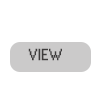
<style>
.page{position:relative;width:100px;height:100px;background:#ffffff}
.page>*{position:absolute;margin:0}
.t1{font:14px "MS Sans Serif";color:#3e3c3c;font-weight:bold;scale:0.91 1}
.t2{font:11.9px "MS Sans Serif";color:#3e3c3c;font-weight:bold;scale:0.91 1}
</style>
<div class="page">
<p class="t1" style="left:28px;top:48px;width:34px;height:13px"><span class="t2">  </span>VIEW</p>
</div>
